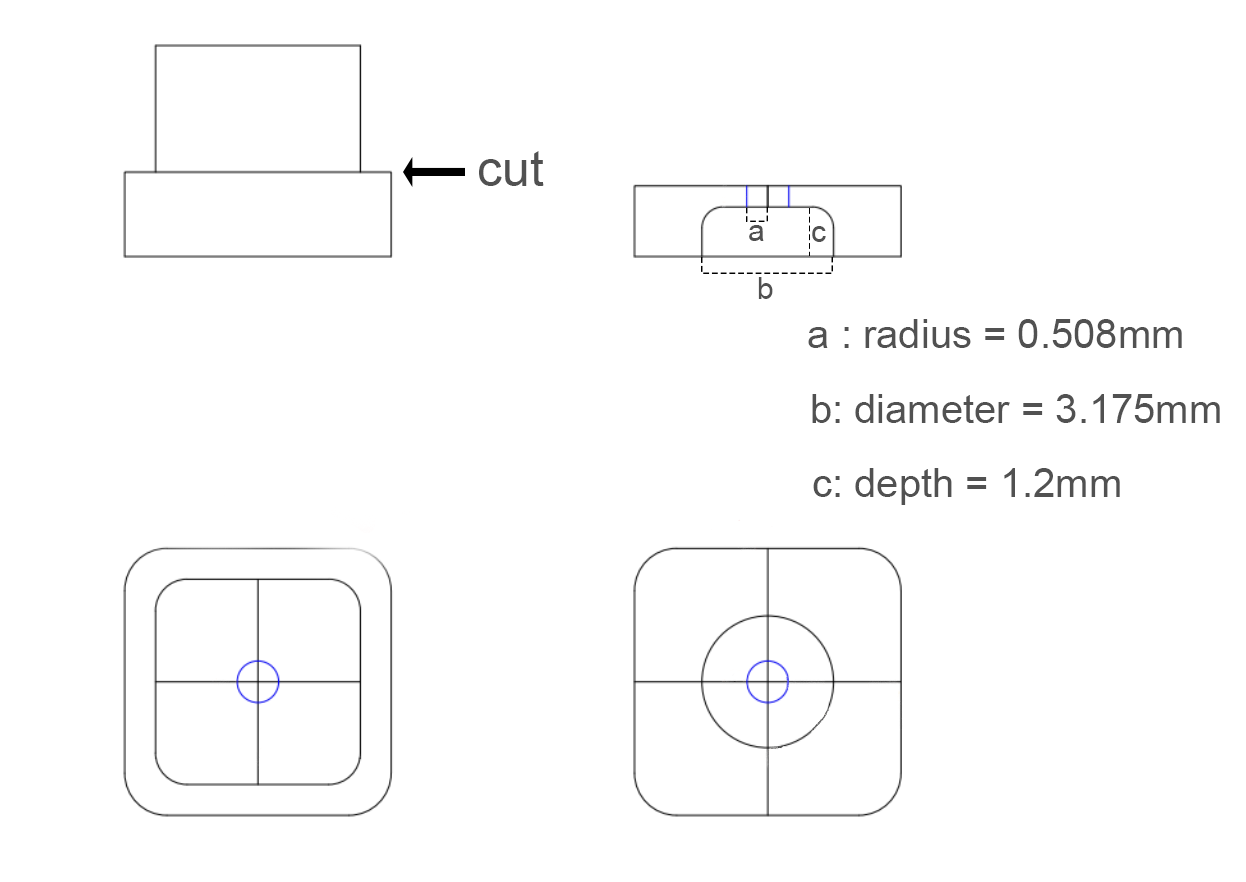
<style>
.page{position:relative;width:1246px;height:882px;background:#ffffff}
.page>*{position:absolute;margin:0}
.t1{font:50px "ArialMT";color:#515151}
.t2{font:30px "ArialMT";color:#515151}
.t3{font:40px "ArialMT";color:#515151}
</style>
<div class="page">
<p class="t1" style="left:479px;top:151px;width:65px;height:35px">cut</p>
<p class="t2" style="left:749px;top:225px;width:15px;height:16px">a</p>
<p class="t2" style="left:812px;top:226px;width:14px;height:16px">c</p>
<p class="t2" style="left:758px;top:277px;width:15px;height:22px">b</p>
<p class="t3" style="left:808px;top:319px;width:374px;height:29px">a : radius = 0.508mm</p>
<p class="t3" style="left:812px;top:394px;width:408px;height:29px">b: diameter = 3.175mm</p>
<p class="t3" style="left:813px;top:468px;width:307px;height:37px">c: depth = 1.2mm</p>
</div>
